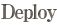
<style>
.page{position:relative;width:57px;height:25px;background:#ffffff}
.page>*{position:absolute;margin:0}
.t1{font:20px "RyuminPro-ExBold";letter-spacing:-0.08em;color:#756d63}
</style>
<div class="page">
<p class="t1" style="left:1px;top:4px;width:56px;height:18px">Deploy</p>
</div>
